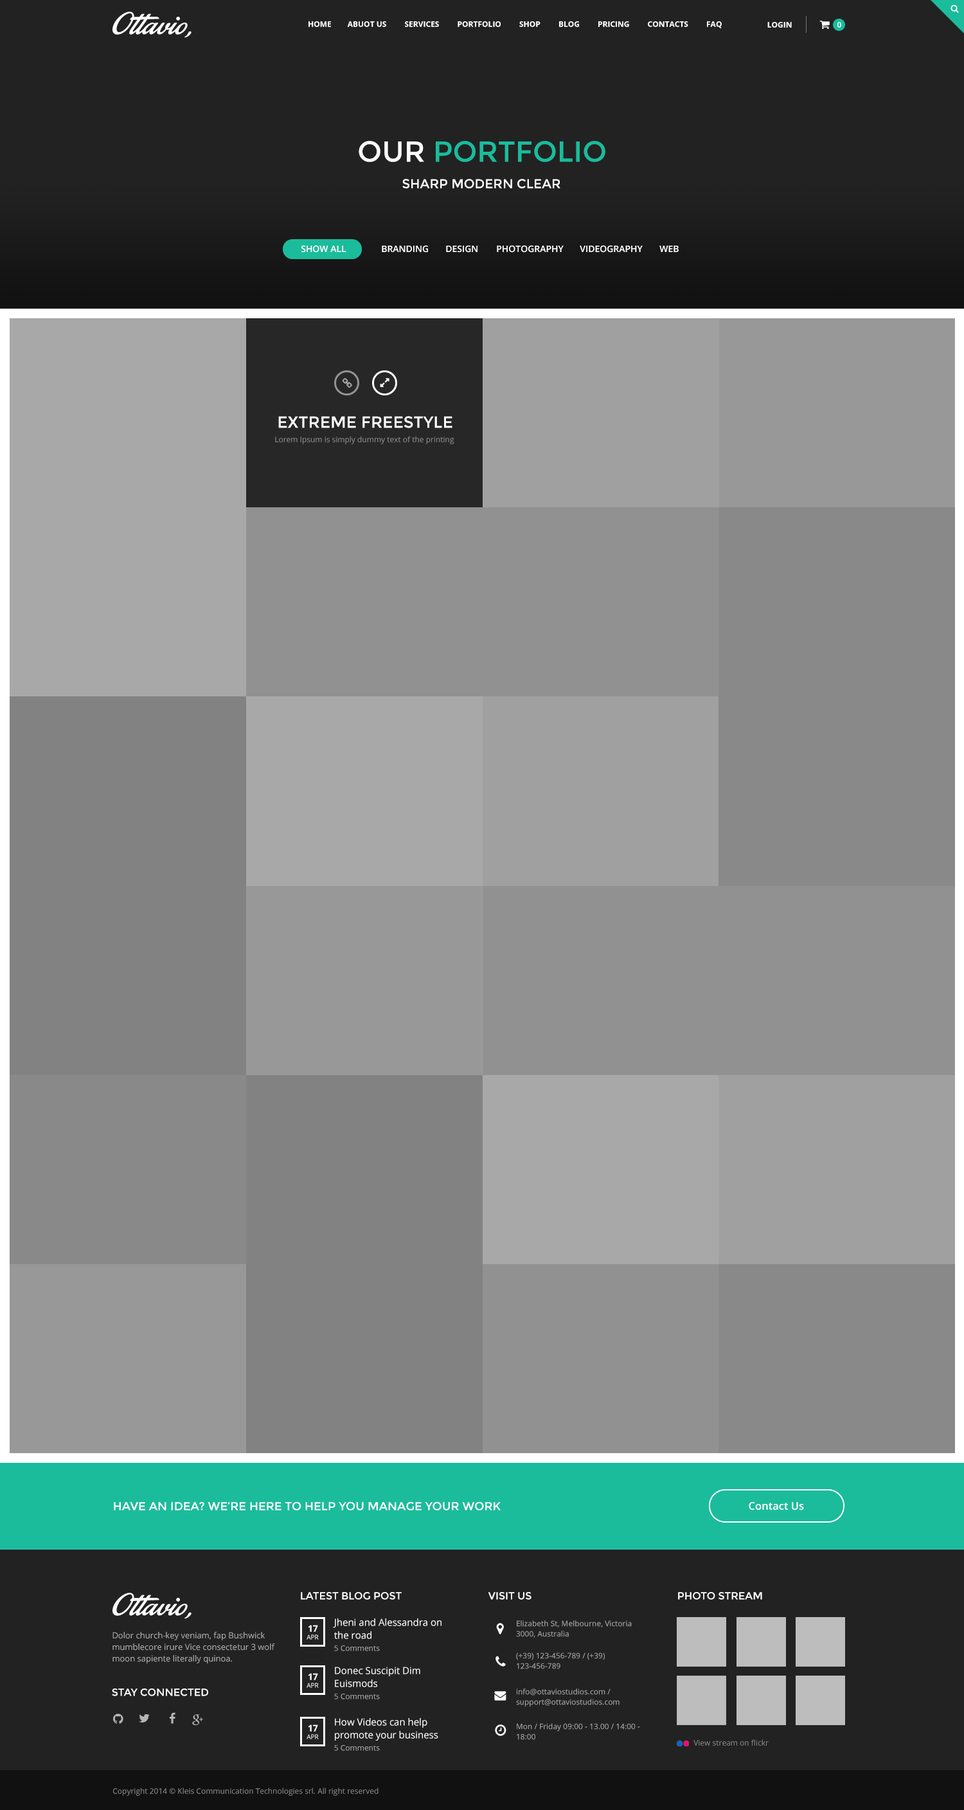
<style>
.page{position:relative;width:964px;height:1810px;background:#222222}
.page>*{position:absolute;margin:0}
.t1{font:7.7px "OpenSans-Bold";color:#ffffff;text-transform:uppercase}
.t2{font:7.7px "OpenSans-Semibold";color:#ffffff;text-transform:uppercase}
.t3{font:28.9px "Montserrat-Regular";color:#1abc9c;text-transform:uppercase}
.t4{font:28.9px "Montserrat-Regular";color:#ffffff;text-transform:uppercase}
.t5{font:12.9px "Montserrat-Regular";color:#ffffff;text-transform:uppercase}
.t6{font:9px "OpenSans-Semibold";color:#ffffff}
.t7{font:9px "OpenSans-Semibold";color:#ffffff;text-transform:uppercase}
.t8{font:16.1px "Montserrat-Regular";color:#ffffff;text-transform:uppercase}
.t9{font:7.7px "OpenSans";color:#8d8d8d}
.t10{font:11.6px "Montserrat-Regular";color:#ffffff;text-transform:uppercase}
.t11{font:10.7px "OpenSans-Semibold";color:#ffffff}
.t12{font:10.3px "Montserrat-Regular";color:#ffffff;text-transform:uppercase}
.t13{font:9px "OpenSans-Bold";color:#ffffff;text-transform:uppercase}
.t14{font:9.6px/12.9px "OpenSans";color:#ffffff}
.t15{font:7.7px/10.3px "OpenSans";color:#a8a8a8}
.t16{font:8.4px/11.6px "OpenSans";color:#a8a8a8}
.t17{font:6.4px "OpenSans";color:#ffffff;text-transform:uppercase}
.t18{font:7.7px "OpenSans";color:#a9a9a9}
.t19{font:7.7px "OpenSans";color:#878787}
</style>
<div class="page">
<p class="t1" style="left:309px;top:21px;width:413px;height:7px">Home        Abuot us         Services         Portfolio         Shop         Blog         Pricing         Contacts         Faq</p>
<p class="t1" style="left:768px;top:22px;width:24px;height:6px">Login</p>
<p class="t2" style="left:838px;top:22px;width:3px;height:6px">0</p>
<p class="t3" style="left:359px;top:141px;width:247px;height:21px"><span class="t4">Our </span>portfolio</p>
<p class="t5" style="left:402px;top:179px;width:159px;height:9px">SHARP MODERN CLEAR</p>
<p class="t6" style="left:301px;top:245px;width:45px;height:8px">SHOW ALL</p>
<p class="t7" style="left:382px;top:245px;width:46px;height:8px">Branding</p>
<p class="t7" style="left:446px;top:245px;width:32px;height:8px">Design</p>
<p class="t7" style="left:497px;top:245px;width:67px;height:8px">Photography</p>
<p class="t7" style="left:580px;top:245px;width:63px;height:8px">Videography</p>
<p class="t7" style="left:660px;top:246px;width:19px;height:6px">Web</p>
<p class="t8" style="left:278px;top:416px;width:175px;height:12px">EXTREME FREESTYLE</p>
<p class="t9" style="left:275px;top:436px;width:179px;height:8px">Lorem Ipsum is simply dummy text of the printing</p>
<p class="t10" style="left:114px;top:1501px;width:387px;height:9px">HAVE AN IDEA? WE’RE HERE TO HELP YOU MANAGE YOUR WORK</p>
<p class="t11" style="left:749px;top:1502px;width:55px;height:8px">Contact Us</p>
<p class="t12" style="left:301px;top:1592px;width:101px;height:7px">Latest blog post</p>
<p class="t12" style="left:488px;top:1592px;width:44px;height:7px">Visit US</p>
<p class="t12" style="left:678px;top:1592px;width:84px;height:7px">Photo stream</p>
<p class="t13" style="left:308px;top:1624px;width:10px;height:8px">17</p>
<p class="t14" style="left:333px;top:1618px;width:109px;height:21px">Jheni and Alessandra on <br>the road</p>
<p class="t15" style="left:516px;top:1620px;width:116px;height:17px">Elizabeth St, Melbourne, Victoria 3000, Australia</p>
<p class="t16" style="left:112px;top:1632px;width:163px;height:31px">Dolor church-key veniam, fap Bushwick mumblecore irure Vice consectetur 3 wolf moon sapiente literally quinoa.</p>
<p class="t17" style="left:307px;top:1634px;width:12px;height:5px">apr</p>
<p class="t18" style="left:334px;top:1645px;width:46px;height:6px">5 Comments</p>
<p class="t15" style="left:516px;top:1652px;width:89px;height:17px">(+39) 123-456-789 / (+39) 123-456-789</p>
<p class="t13" style="left:308px;top:1673px;width:10px;height:7px">17</p>
<p class="t14" style="left:335px;top:1666px;width:85px;height:21px">Donec Suscipit Dim <br>Euismods</p>
<p class="t17" style="left:307px;top:1682px;width:12px;height:5px">apr</p>
<p class="t12" style="left:112px;top:1688px;width:96px;height:8px">Stay connected</p>
<p class="t18" style="left:334px;top:1693px;width:46px;height:6px">5 Comments</p>
<p class="t15" style="left:516px;top:1688px;width:104px;height:19px">info@ottaviostudios.com / support@ottaviostudios.com</p>
<p class="t14" style="left:335px;top:1718px;width:103px;height:22px">How Videos can help <br>promote your business</p>
<p class="t17" style="left:307px;top:1734px;width:12px;height:5px">apr</p>
<p class="t13" style="left:308px;top:1724px;width:10px;height:7px">17</p>
<p class="t15" style="left:517px;top:1723px;width:123px;height:17px">Mon / Friday 09:00 - 13.00 / 14:00 - 18:00</p>
<p class="t18" style="left:334px;top:1745px;width:46px;height:5px">5 Comments</p>
<p class="t19" style="left:694px;top:1739px;width:75px;height:6px">View stream on flickr</p>
<p class="t19" style="left:113px;top:1787px;width:266px;height:8px">Copyright 2014 © Kleis Communication Technologies srl. All right reserved</p>
</div>
